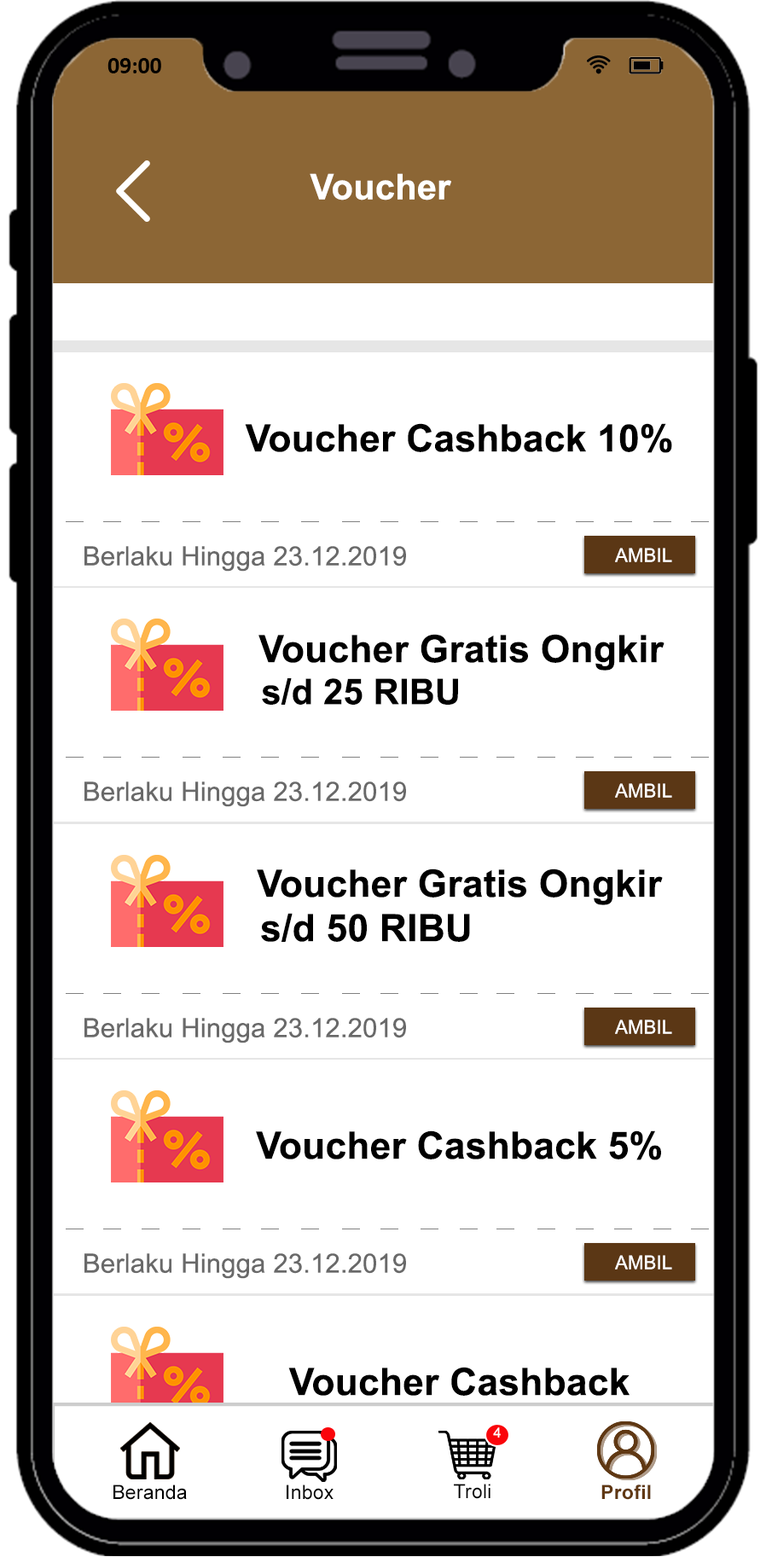
<style>
.page{position:relative;width:766px;height:1557px;background:#ffffff}
.page>*{position:absolute;margin:0}
.t1{font:23.6px "Calibri-Bold";color:#000000}
.t2{font:35.5px "Arial-BoldMT";letter-spacing:0.005em;color:#ffffff}
.t3{font:37.8px "Arial-BoldMT";letter-spacing:0.005em;color:#000000}
.t4{font:26.5px "ArialMT";letter-spacing:0.005em;color:#696969}
.t5{font:18.9px "ArialMT";letter-spacing:0.005em;color:#ffffff}
.t6{font:35.5px "Arial-BoldMT";letter-spacing:0.005em;color:#000000}
.t7{font:14.2px "ArialMT";letter-spacing:0.01em;color:#ffffff}
.t8{font:19.6px "ArialMT";letter-spacing:0.01em;color:#000000}
.t9{font:19.6px "Arial-BoldMT";letter-spacing:0.01em;color:#603813}
</style>
<div class="page">
<p class="t1" style="left:107px;top:58px;width:54px;height:15px">09:00</p>
<p class="t2" style="left:310px;top:173px;width:141px;height:27px">Voucher</p>
<p class="t3" style="left:245px;top:423px;width:427px;height:30px">Voucher Cashback 10%</p>
<p class="t4" style="left:84px;top:546px;width:322px;height:26px">Berlaku Hingga 23.12.2019</p>
<p class="t5" style="left:615px;top:548px;width:57px;height:14px">AMBIL</p>
<p class="t3" style="left:258px;top:634px;width:406px;height:36px">Voucher Gratis Ongkir</p>
<p class="t6" style="left:262px;top:678px;width:196px;height:27px">s/d 25 RIBU</p>
<p class="t4" style="left:84px;top:781px;width:322px;height:26px">Berlaku Hingga 23.12.2019</p>
<p class="t5" style="left:615px;top:783px;width:57px;height:15px">AMBIL</p>
<p class="t3" style="left:257px;top:868px;width:406px;height:37px">Voucher Gratis Ongkir</p>
<p class="t3" style="left:261px;top:913px;width:209px;height:29px">s/d 50 RIBU</p>
<p class="t4" style="left:84px;top:1018px;width:322px;height:25px">Berlaku Hingga 23.12.2019</p>
<p class="t5" style="left:615px;top:1019px;width:57px;height:15px">AMBIL</p>
<p class="t3" style="left:256px;top:1130px;width:405px;height:30px">Voucher Cashback 5%</p>
<p class="t4" style="left:84px;top:1253px;width:322px;height:26px">Berlaku Hingga 23.12.2019</p>
<p class="t5" style="left:615px;top:1255px;width:57px;height:14px">AMBIL</p>
<p class="t3" style="left:288px;top:1367px;width:342px;height:29px">Voucher Cashback</p>
<p class="t7" style="left:493px;top:1427px;width:8px;height:10px">4</p>
<p class="t8" style="left:113px;top:1484px;width:74px;height:16px">Beranda</p>
<p class="t8" style="left:287px;top:1484px;width:47px;height:16px">Inbox</p>
<p class="t8" style="left:454px;top:1483px;width:36px;height:16px">Troli</p>
<p class="t9" style="left:601px;top:1484px;width:50px;height:16px">Profil</p>
</div>
